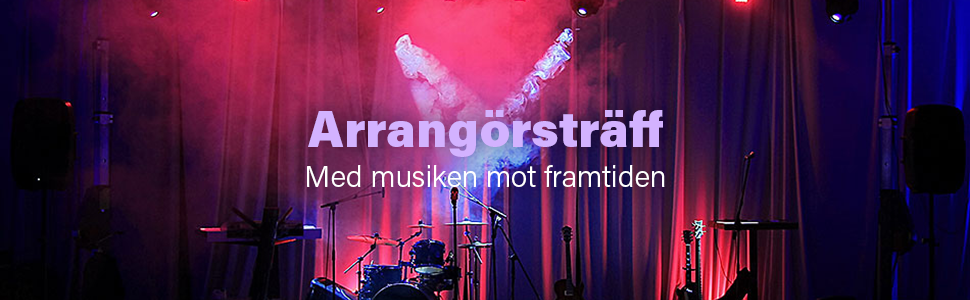
<style>
.page{position:relative;width:970px;height:300px}
.page>*{position:absolute;margin:0}
.t1{font:30px/40px "AcuminPro-Light";color:#ffffff}
.t2{font:50px/60px "AcuminPro-Black";color:#d3b2ff}
</style>
<div class="page">
<p class="t1" style="left:307px;top:110px;width:358px;height:77px;text-align:center"><span class="t2">Arrangörsträff<br></span>Med musiken mot framtiden</p>
</div>
